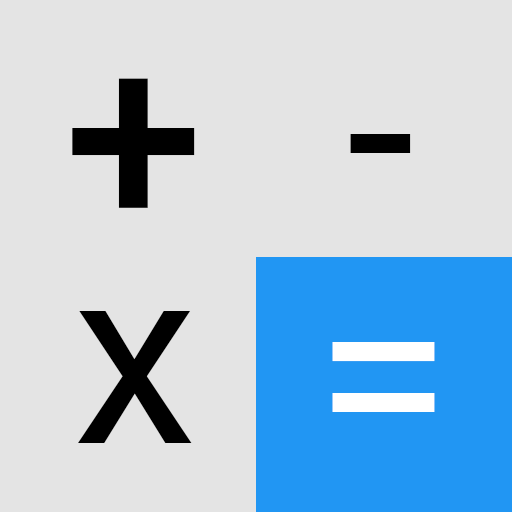
<style>
.page{position:relative;width:512px;height:512px;background:#e4e4e4}
.page>*{position:absolute;margin:0}
.t1{font:250px "Roboto-Medium";color:#000000}
.t2{font:250px "Roboto-Regular";color:#000000}
.t3{font:250px "Roboto-Regular";color:#ffffff}
</style>
<div class="page">
<p class="t1" style="left:72px;top:78px;width:123px;height:130px">+</p>
<p class="t2" style="left:350px;top:134px;width:61px;height:19px">-</p>
<p class="t2" style="left:78px;top:311px;width:114px;height:132px">x</p>
<p class="t3" style="left:332px;top:342px;width:103px;height:70px">=</p>
</div>
